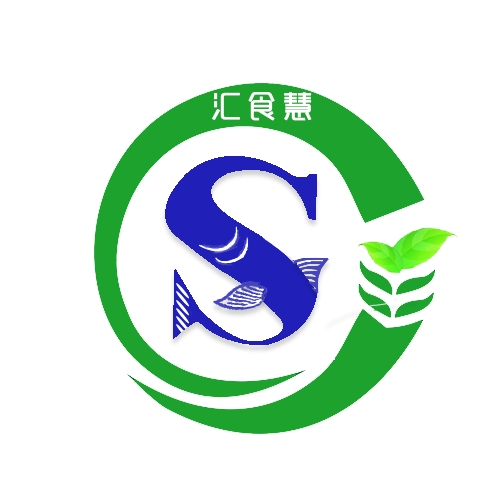
<style>
.page{position:relative;width:500px;height:500px;background:#ffffff}
.page>*{position:absolute;margin:0}
.t1{font:30.2px "RTWSYueGoTrial-Regular";letter-spacing:0.2em;color:#ffffff;font-weight:bold;scale:0.96 1}
</style>
<div class="page">
<p class="t1" style="left:212px;top:92px;width:100px;height:29px">汇食慧</p>
</div>
